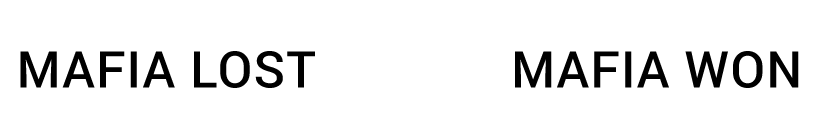
<style>
.page{position:relative;width:829px;height:136px;background:#ffffff}
.page>*{position:absolute;margin:0}
.t1{font:50.5px "Roboto-Medium";letter-spacing:0.025em;color:#000000}
</style>
<div class="page">
<p class="t1" style="left:20px;top:51px;width:779px;height:37px">MAFIA LOST              MAFIA WON</p>
</div>
